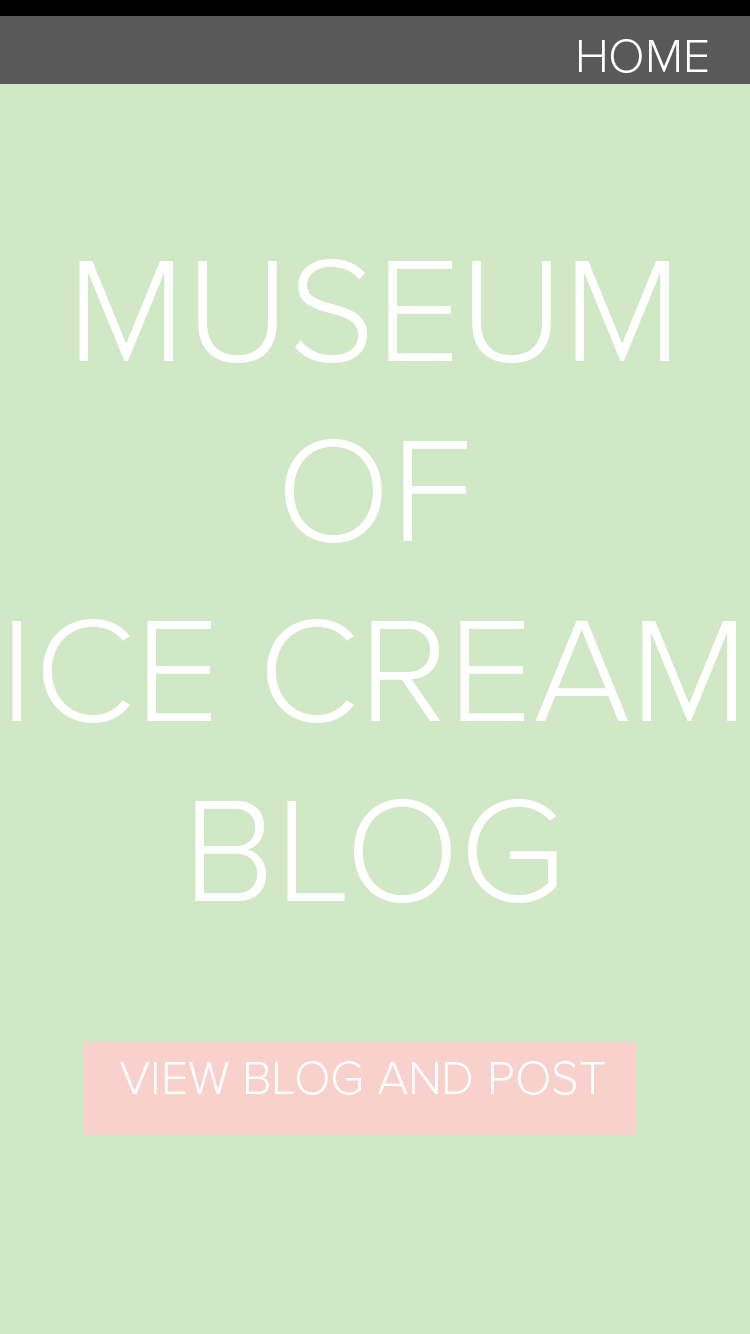
<style>
.page{position:relative;width:750px;height:1334px;background:#d1e8c6}
.page>*{position:absolute;margin:0}
.t1{font:48px "ProximaNova-Light";color:#ffffff}
.t2{font:150px "ProximaNova-Light";color:#ffffff}
</style>
<div class="page">
<p class="t1" style="left:579px;top:39px;width:129px;height:34px">HOME</p>
<p class="t2" style="left:12px;top:259px;width:724px;height:644px;text-align:center">MUSEUM<br>OF <br>ICE CREAM <br>BLOG</p>
<p class="t1" style="left:120px;top:1061px;width:485px;height:34px">VIEW BLOG AND POST</p>
</div>
